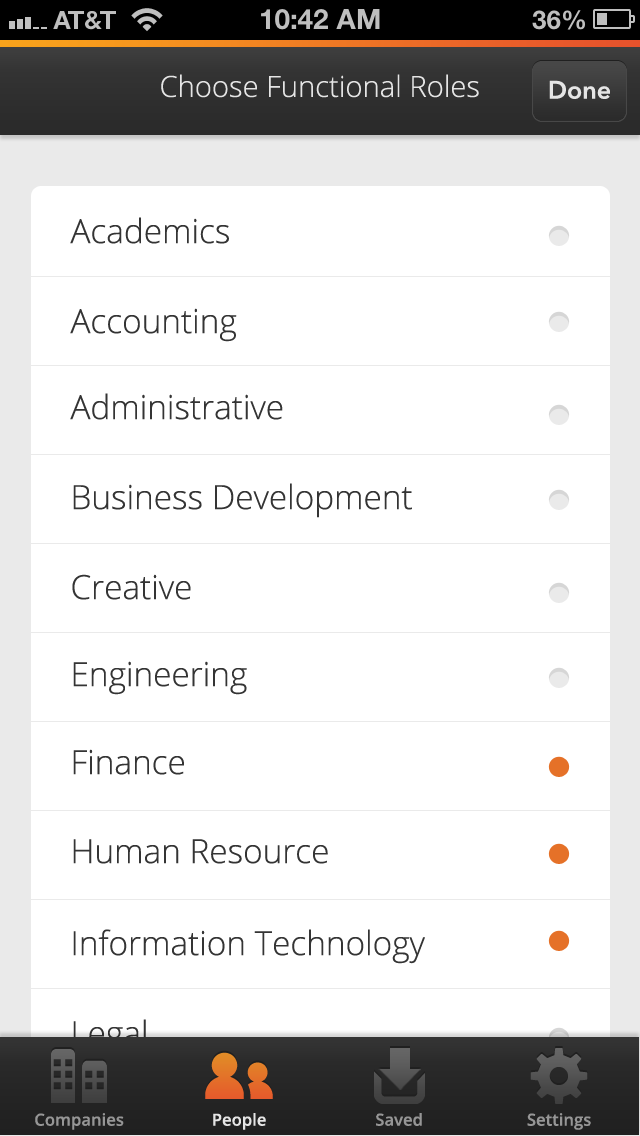
<style>
.page{position:relative;width:640px;height:1136px;background:#ffffff}
.page>*{position:absolute;margin:0}
.t1{font:29.2px "OpenSans-Light";color:#e5e5e5}
.t2{font:25px "AvenirNext-DemiBold";color:#e5e5e5}
.t3{font:33.3px "OpenSans-Light";color:#343434}
.t4{font:16.7px "OpenSans-Semibold";color:#969696}
.t5{font:16.7px "OpenSans-Semibold";color:#e5e5e5}
</style>
<div class="page">
<p class="t1" style="left:161px;top:74px;width:318px;height:24px">Choose Functional Roles</p>
<p class="t2" style="left:549px;top:80px;width:61px;height:19px">Done</p>
<p class="t3" style="left:70px;top:217px;width:159px;height:27px">Academics</p>
<p class="t3" style="left:70px;top:308px;width:167px;height:34px">Accounting</p>
<p class="t3" style="left:70px;top:393px;width:213px;height:27px">Administrative</p>
<p class="t3" style="left:73px;top:483px;width:339px;height:35px">Business Development</p>
<p class="t3" style="left:72px;top:574px;width:119px;height:26px">Creative</p>
<p class="t3" style="left:73px;top:661px;width:174px;height:34px">Engineering</p>
<p class="t3" style="left:73px;top:749px;width:111px;height:26px">Finance</p>
<p class="t3" style="left:73px;top:839px;width:255px;height:25px">Human Resource</p>
<p class="t3" style="left:73px;top:929px;width:352px;height:35px">Information Technology</p>
<p class="t3" style="left:73px;top:1019px;width:73px;height:35px">Legal</p>
<p class="t4" style="left:35px;top:1113px;width:89px;height:17px">Companies</p>
<p class="t5" style="left:213px;top:1113px;width:53px;height:17px">People</p>
<p class="t4" style="left:376px;top:1113px;width:46px;height:13px">Saved</p>
<p class="t4" style="left:527px;top:1113px;width:64px;height:17px">Settings</p>
</div>
